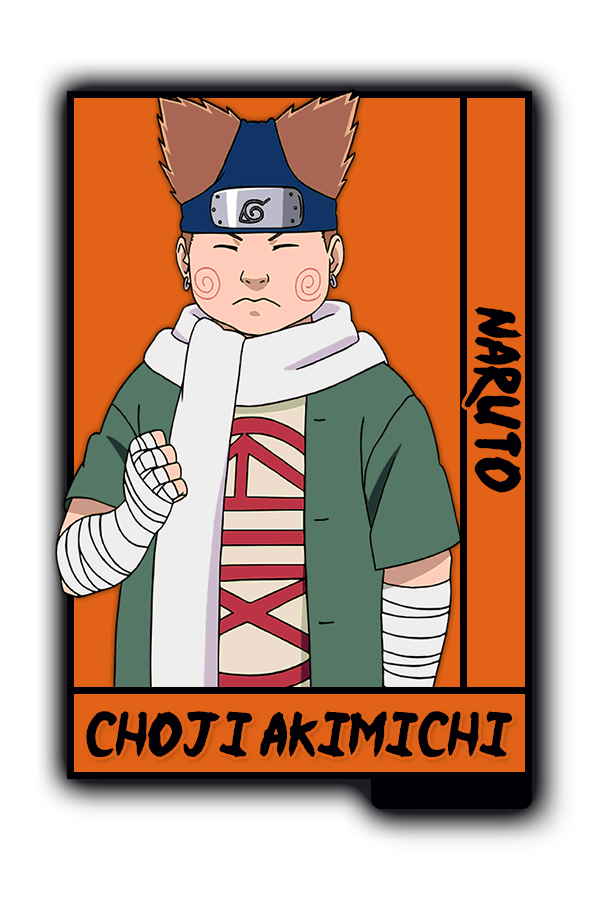
<style>
.page{position:relative;width:600px;height:900px;background:#ffffff}
.page>*{position:absolute;margin:0}
.t1{font:52px "Ninja-Naruto";color:#010005}
.t2{font:50.5px "Ninja-Naruto";color:#010005}
</style>
<div class="page">
<p class="t1" style="left:464px;top:307px;width:59px;height:186px;rotate:90deg">Naruto</p>
<p class="t2" style="left:86px;top:711px;width:427px;height:46px">Choji Akimichi</p>
</div>
